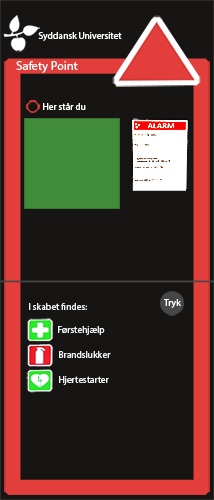
<style>
.page{position:relative;width:214px;height:500px;background:#161513}
.page>*{position:absolute;margin:0}
.t1{font:9.4px "MyriadPro-Regular";color:#ffffff}
.t2{font:12.3px "MyriadPro-Regular";color:#ffffff}
.t3{font:9.4px "MyriadPro-Regular";color:#ecf1f0}
</style>
<div class="page">
<p class="t1" style="left:38px;top:32px;width:84px;height:9px">Syddansk Universitet</p>
<p class="t2" style="left:16px;top:61px;width:62px;height:12px">Safety Point</p>
<p class="t1" style="left:43px;top:103px;width:43px;height:7px">Her står du</p>
<p class="t3" style="left:29px;top:303px;width:58px;height:7px">I skabet findes:</p>
<p class="t1" style="left:164px;top:299px;width:17px;height:9px">Tryk</p>
<p class="t3" style="left:58px;top:326px;width:47px;height:9px">Førstehjælp</p>
<p class="t3" style="left:59px;top:351px;width:52px;height:7px">Brandslukker</p>
<p class="t3" style="left:59px;top:376px;width:50px;height:9px">Hjertestarter</p>
</div>
